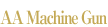
<style>
.page{position:relative;width:108px;height:27px;background:#ffffff}
.page>*{position:absolute;margin:0}
.t1{font:18px "RyuminPro-ExBold";letter-spacing:-0.1em;color:#c4a956;scale:0.86 1}
</style>
<div class="page">
<p class="t1" style="left:0px;top:10px;width:107px;height:15px">AA Machine Gun</p>
</div>
